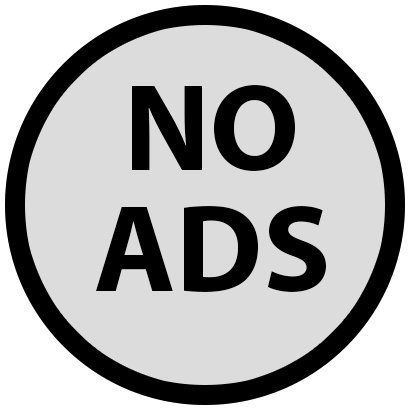
<style>
.page{position:relative;width:410px;height:410px;background:#dcdcdc}
.page>*{position:absolute;margin:0}
.t1{font:124.9px/121.2px "MyriadPro-Bold";color:#000000}
</style>
<div class="page">
<p class="t1" style="left:96px;top:85px;width:230px;height:207px;text-align:center">NO<br>ADS</p>
</div>
